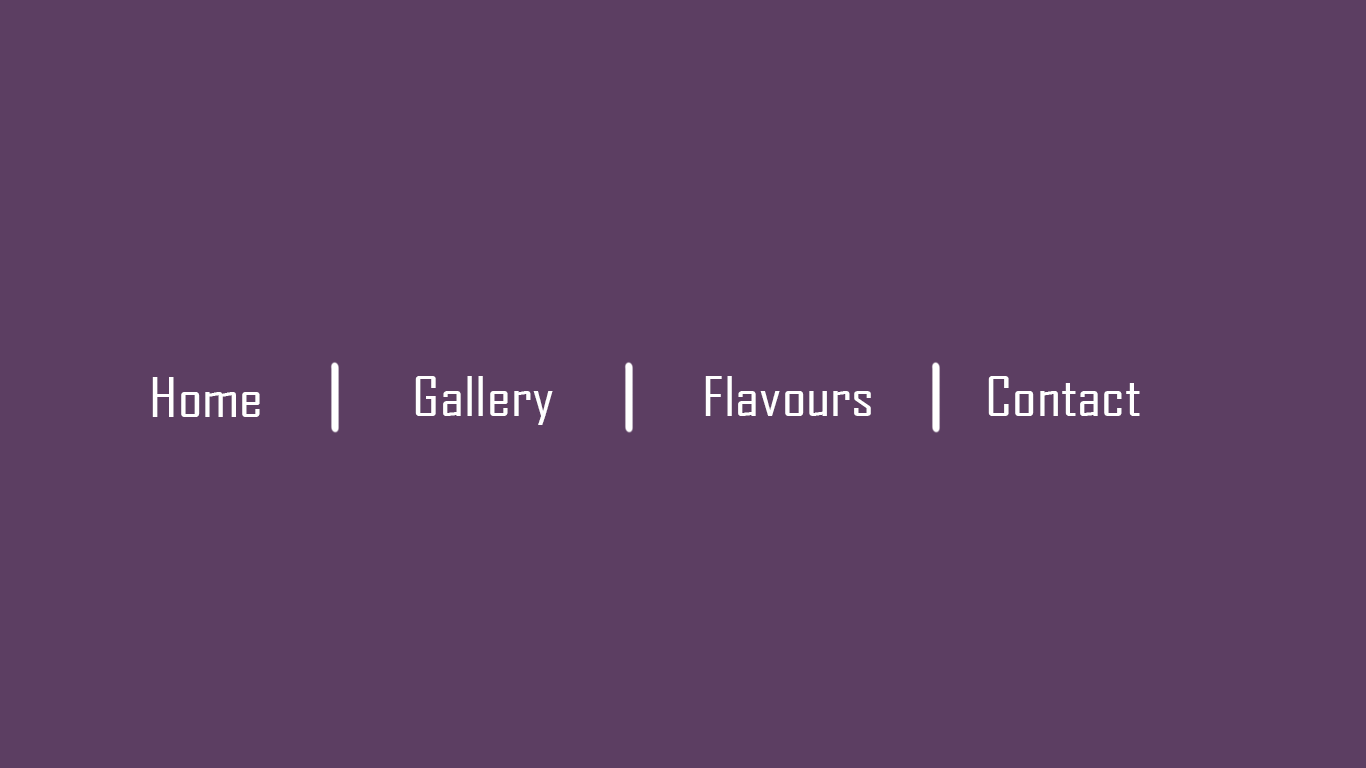
<style>
.page{position:relative;width:1366px;height:768px;background:#5c3e62}
.page>*{position:absolute;margin:0}
.t1{font:90px "AgencyFB-Reg";color:#ffffff;scale:1.22 1}
</style>
<div class="page">
<p class="t1" style="left:152px;top:377px;width:108px;height:40px">Home</p>
<p class="t1" style="left:415px;top:376px;width:138px;height:49px">Gallery</p>
<p class="t1" style="left:705px;top:376px;width:166px;height:40px">Flavours</p>
<p class="t1" style="left:988px;top:376px;width:152px;height:40px">Contact</p>
</div>
